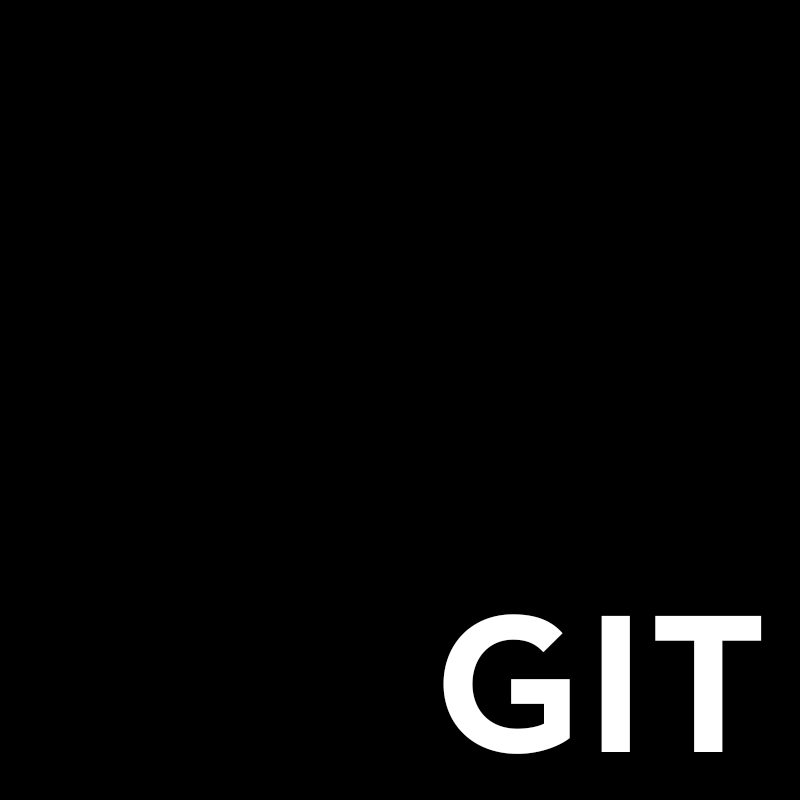
<style>
.page{position:relative;width:800px;height:800px;background:#000000}
.page>*{position:absolute;margin:0}
.t1{font:200px "NeutraText-Bold";letter-spacing:0.025em;color:#ffffff}
</style>
<div class="page">
<p class="t1" style="left:443px;top:614px;width:319px;height:140px">GIT</p>
</div>
